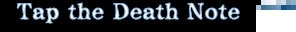
<style>
.page{position:relative;width:296px;height:32px;background:#000000}
.page>*{position:absolute;margin:0}
.t1{font:22px "ComicMysteryStd-DB";font-weight:bold}
</style>
<div class="page">
<p class="t1" style="left:16px;top:2px;width:224px;height:22px">Tap the Death Note</p>
</div>
